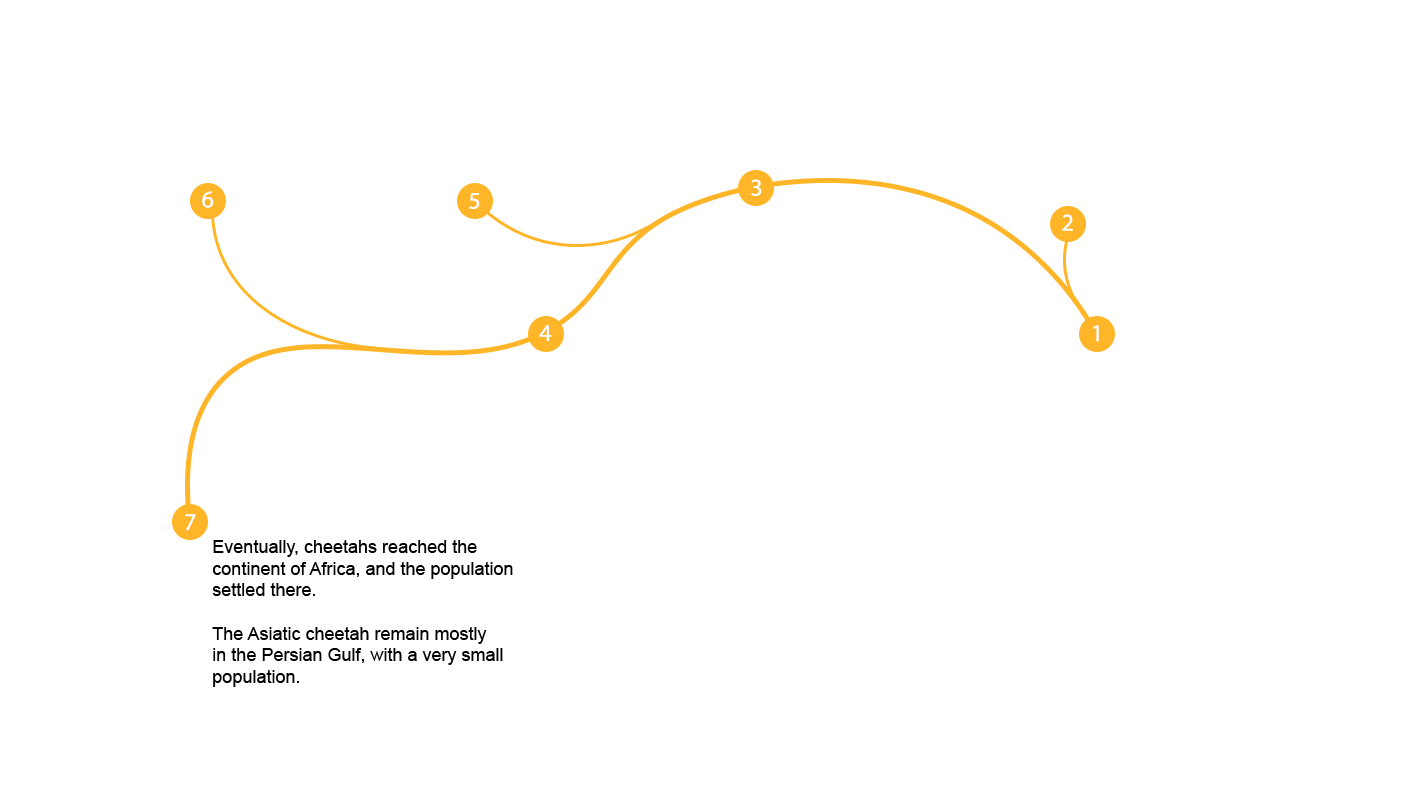
<style>
.page{position:relative;width:1415px;height:809px;background:#ffffff}
.page>*{position:absolute;margin:0}
.t1{font:18px "ArialMT";color:#000000}
</style>
<div class="page">
<p class="t1" style="left:212px;top:540px;width:301px;height:147px">Eventually, cheetahs reached the<br>continent of Africa, and the population<br>settled there.<br><br>The Asiatic cheetah remain mostly<br>in the Persian Gulf, with a very small<br>population.</p>
</div>
